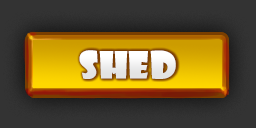
<style>
.page{position:relative;width:256px;height:128px;background:#333333}
.page>*{position:absolute;margin:0}
.t1{font:36px "ShowcardGothic-Reg";letter-spacing:0.025em;color:#ffffff;font-weight:bold}
</style>
<div class="page">
<p class="t1" style="left:79px;top:50px;width:97px;height:29px">Shed</p>
</div>
